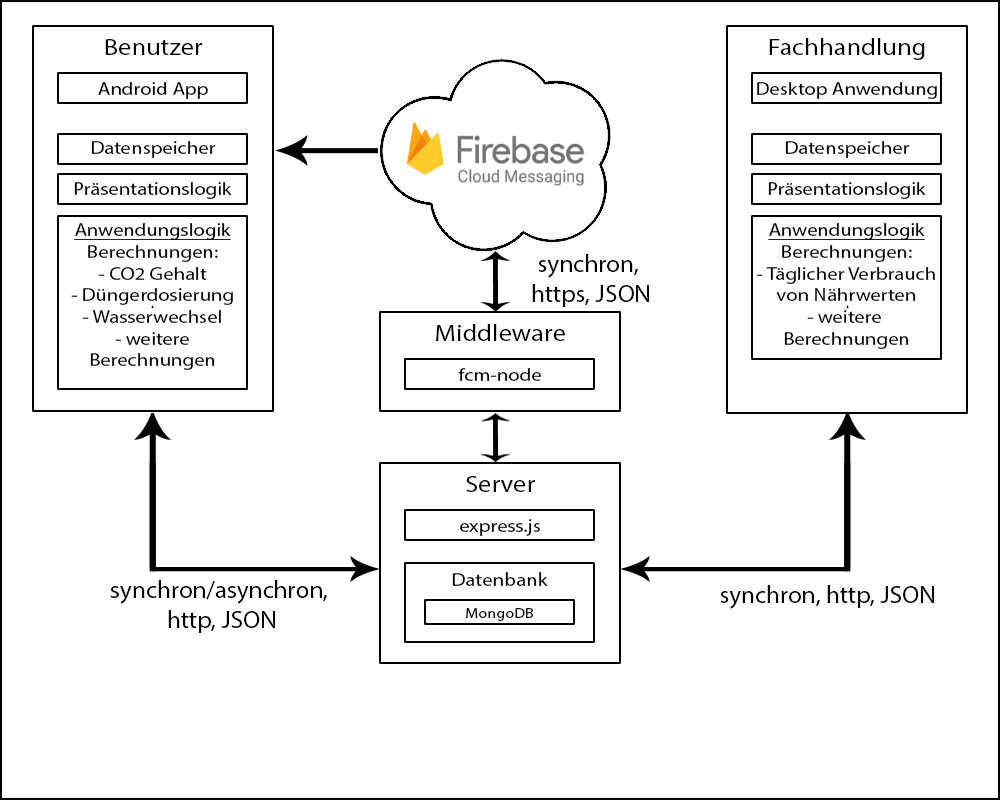
<style>
.page{position:relative;width:1000px;height:800px;background:#ffffff}
.page>*{position:absolute;margin:0}
.t1{font:23.4px "MyriadPro-Regular";color:#000000;scale:1.13 1}
.t2{font:18.2px "MyriadPro-Regular";color:#000000;scale:1.13 1}
.t3{font:18.3px "MyriadPro-Regular";color:#000000;scale:1.13 1}
.t4{font:18.1px "MyriadPro-Regular";color:#000000;scale:1.14 1}
.t5{font:18.1px "MyriadPro-Regular";color:#000000;text-decoration:underline;scale:1.14 1}
.t6{font:25px "MyriadPro-Regular";color:#000000}
.t7{font:18.7px "MyriadPro-Regular";color:#000000;scale:1.12 1}
.t8{font:14.5px "MyriadPro-Regular";color:#000000;scale:1.12 1}
</style>
<div class="page">
<p class="t1" style="left:105px;top:39px;width:98px;height:16px">Benutzer</p>
<p class="t1" style="left:769px;top:38px;width:156px;height:22px">Fachhandlung</p>
<p class="t2" style="left:98px;top:82px;width:110px;height:17px">Android App</p>
<p class="t2" style="left:757px;top:82px;width:180px;height:17px">Desktop Anwendung</p>
<p class="t2" style="left:91px;top:141px;width:125px;height:17px">Datenspeicher</p>
<p class="t2" style="left:785px;top:141px;width:125px;height:17px">Datenspeicher</p>
<p class="t3" style="left:74px;top:182px;width:158px;height:17px">Präsentationslogik</p>
<p class="t3" style="left:768px;top:182px;width:158px;height:17px">Präsentationslogik</p>
<p class="t4" style="left:71px;top:223px;width:162px;height:147px;text-align:center"><span class="t5">Anwendungslogik<br></span>Berechnungen:<br>- CO2 Gehalt<br>- Düngerdosierung<br>- Wasserwechsel<br>- weitere<br>Berechnungen</p>
<p class="t4" style="left:757px;top:223px;width:178px;height:126px;text-align:center"><span class="t5">Anwendungslogik<br></span>Berechnungen:<br>- Täglicher Verbrauch<br>von Nährwerten<br>- weitere <br>Berechnungen</p>
<p class="t6" style="left:532px;top:254px;width:117px;height:53px;text-align:center">synchron, <br>https, JSON</p>
<p class="t1" style="left:436px;top:324px;width:129px;height:17px">Middleware</p>
<p class="t2" style="left:458px;top:368px;width:83px;height:13px">fcm-node</p>
<p class="t1" style="left:466px;top:476px;width:69px;height:16px">Server</p>
<p class="t2" style="left:460px;top:519px;width:80px;height:17px">express.js</p>
<p class="t6" style="left:110px;top:580px;width:217px;height:53px;text-align:center">synchron/asynchron, <br>http, JSON</p>
<p class="t7" style="left:452px;top:572px;width:96px;height:14px">Datenbank</p>
<p class="t6" style="left:720px;top:585px;width:214px;height:24px">synchron, http, JSON</p>
<p class="t8" style="left:466px;top:608px;width:67px;height:13px">MongoDB</p>
</div>
